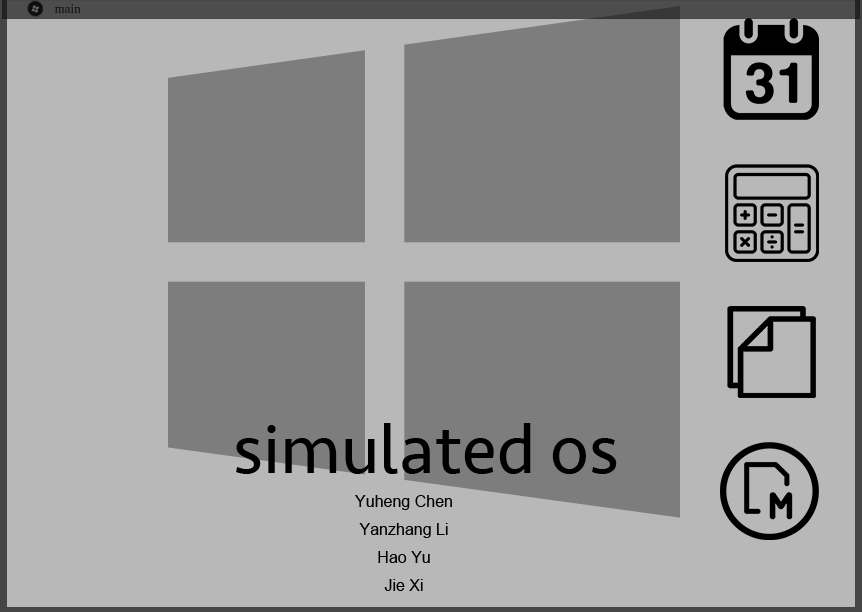
<style>
.page{position:relative;width:862px;height:612px;background:#b8b8b8}
.page>*{position:absolute;margin:0}
.t1{font:12px "Charter-Roman";color:#010101}
.t2{font:71px "Seravek";color:#000000}
.t3{font:16px "ArialMT";color:#000000}
</style>
<div class="page">
<p class="t1" style="left:55px;top:4px;width:26px;height:9px">main</p>
<p class="t2" style="left:236px;top:423px;width:381px;height:51px">simulated os</p>
<p class="t3" style="left:355px;top:495px;width:97px;height:96px;text-align:center">Yuheng Chen<br>Yanzhang Li <br>Hao Yu<br>Jie Xi <br><br>Yuheng Chen</p>
</div>
